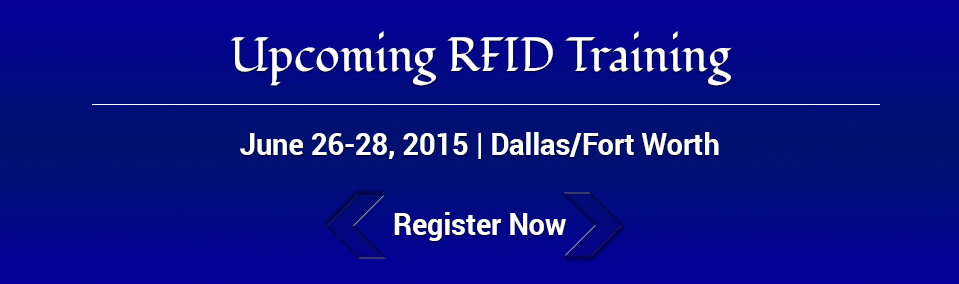
<style>
.page{position:relative;width:959px;height:284px}
.page>*{position:absolute;margin:0}
.t1{font:48px "Fondamento-Regular";color:#ffffff;scale:0.96 1}
.t2{font:30px "Roboto-Bold";color:#ffffff;scale:0.96 1}
</style>
<div class="page">
<p class="t1" style="left:231px;top:31px;width:501px;height:55px">Upcoming RFID Training</p>
<p class="t2" style="left:240px;top:132px;width:479px;height:27px">June 26-28, 2015 | Dallas/Fort Worth</p>
<p class="t2" style="left:394px;top:212px;width:172px;height:29px">Register Now</p>
</div>
